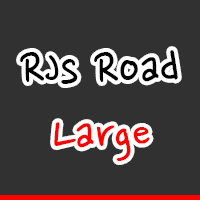
<style>
.page{position:relative;width:200px;height:200px;background:#313131}
.page>*{position:absolute;margin:0}
.t1{font:54px "NanumPen";color:#000000}
.t2{font:54px "NanumPen";color:#ff0000}
</style>
<div class="page">
<p class="t1" style="left:20px;top:50px;width:158px;height:34px">RJs Road</p>
<p class="t2" style="left:54px;top:122px;width:96px;height:39px">Large</p>
</div>
